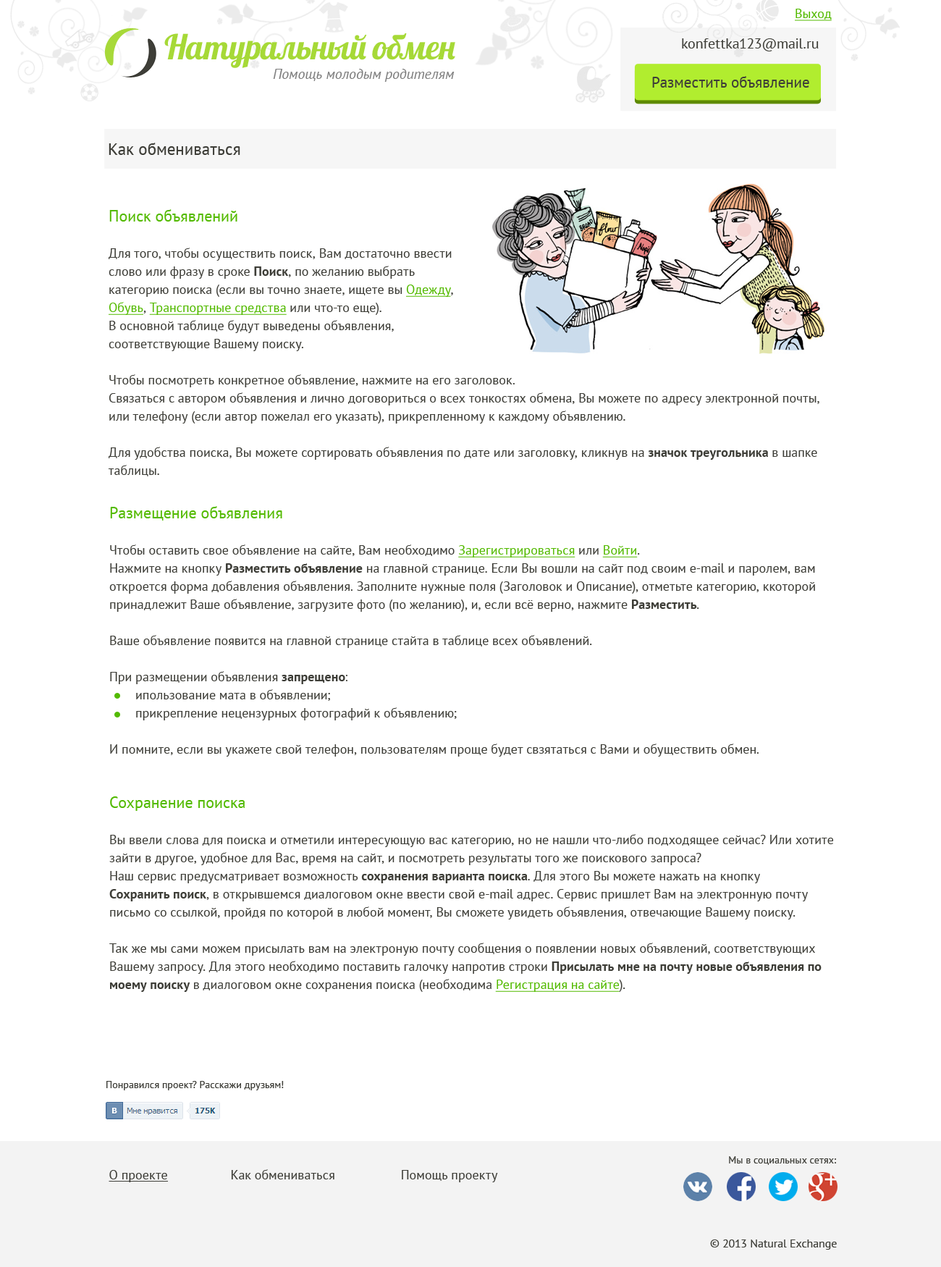
<style>
.page{position:relative;width:941px;height:1267px;background:#ffffff}
.page>*{position:absolute;margin:0}
.t1{font:13px "PTSans-Regular";color:#53ba00;text-decoration:underline}
.t2{font:34.3px "Lobster";letter-spacing:-0.08em;color:#a6d937}
.t3{font:14.5px "PTSans-Regular";color:#3e3e38}
.t4{font:14.5px "PTSans-Italic";color:#7f7f7f}
.t5{font:15.2px "PTSans-Regular";color:#3e3e38}
.t6{font:16.7px "PTSans-Regular";color:#3e3e38}
.t7{font:13px/18.1px "PTSans-Regular";color:#3e3e38}
.t8{font:15.9px/18.1px "PTSans-Regular";color:#53ba00}
.t9{font:13px/18.1px "PTSans-Bold";color:#3e3e38}
.t10{font:13px/18.1px "PTSans-Regular";color:#53ba00;text-decoration:underline}
.t11{font:13px "PTSans-Bold";color:#3e3e38}
.t12{font:10.1px "PTSans-Regular";color:#3e3e38}
.t13{font:13px "PTSans-Regular";color:#3e3e38}
.t14{font:13px "PTSans-Regular";color:#3e3e38;text-decoration:underline}
.t15{font:11.6px "PTSans-Regular";color:#3e3e38}
</style>
<div class="page">
<p class="t1" style="left:795px;top:9px;width:37px;height:12px">Выход</p>
<p class="t2" style="left:164px;top:33px;width:291px;height:35px">Натуральный  обмен</p>
<p class="t3" style="left:682px;top:38px;width:137px;height:13px">konfettka123@mail.ru</p>
<p class="t4" style="left:273px;top:69px;width:182px;height:13px">Помощь молодым родителям</p>
<p class="t5" style="left:652px;top:76px;width:157px;height:12px">Разместить объявление</p>
<p class="t6" style="left:109px;top:143px;width:131px;height:12px">Как обмениваться</p>
<p class="t7" style="left:108px;top:209px;width:712px;height:267px"><span class="t8">Поиск объявлений<br></span> <br>Для того, чтобы осуществить поиск, Вам достаточно ввести слово или фразу в сроке <span class="t9">Поиск</span>, по желанию выбрать категорию поиска (если вы точно знаете, ищете вы <span class="t10">Одежду</span>, <span class="t10">Обувь</span>, <span class="t10">Транспортные средства</span> или что-то еще).<br>В основной таблице будут выведены объявления, соответствующие Вашему поиску. <br><br>Чтобы посмотреть конкретное объявление, нажмите на его заголовок.<br>Связаться с автором объявления и лично договориться о всех тонкостях обмена, Вы можете по адресу электронной почты, или телефону (если автор пожелал его указать), прикрепленному к каждому объявлению.<br><br>Для удобства поиска, Вы можете сортировать объявления по дате или заголовку, кликнув на <span class="t9">значок треугольника</span> в шапке таблицы.</p>
<p class="t7" style="left:109px;top:506px;width:725px;height:486px"><span class="t8">Размещение объявления<br><br></span>Чтобы оставить свое объявление на сайте, Вам необходимо <span class="t10">Зарегистрироваться</span> или <span class="t10">Войти</span>. <br>Нажмите на кнопку <span class="t9">Разместить объявление</span> на главной странице. Если Вы вошли на сайт под своим e-mail и паролем, вам откроется форма добавления объявления. Заполните нужные поля (Заголовок и Описание), отметьте категорию, ккоторой принадлежит Ваше объявление, загрузите фото (по желанию), и, если всё верно, нажмите <span class="t9">Разместить</span>.<br><br>Ваше объявление появится на главной странице стайта в таблице всех объявлений.<br><br>При размещении объявления <span class="t9">запрещено</span>:<br> ипользование мата в объявлении;<br> прикрепление нецензурных фотографий к объявлению;<br><br>И помните, если вы укажете свой телефон, пользователям проще будет свзятаться с Вами и обуществить обмен.<br><span class="t8"><br><br>Сохранение поиска<br><br></span>Вы ввели слова для поиска и отметили интересующую вас категорию, но не нашли что-либо подходящее сейчас? Или хотите зайти в другое, удобное для Вас, время на сайт, и посмотреть результаты того же поискового запроса?<br>Наш сервис предусматривает возможность <span class="t9">сохранения варианта поиска</span>. Для этого Вы можете нажать на кнопку <br><span class="t9">Сохранить поиск</span>, в открывшемся диалоговом окне ввести свой e-mail адрес. Сервис пришлет Вам на электронную почту письмо со ссылкой, пройдя по которой в любой момент, Вы сможете увидеть объявления, отвечающие Вашему поиску.  <br><br>Так же мы сами можем присылать вам на электроную почту сообщения о появлении новых объявлений, соответствующих Вашему запросу. Для этого необходимо поставить галочку напротив строки <span class="t11">Присылать мне на почту новые объявления по моему поиску </span>в диалоговом окне сохранения поиска (необходима <span class="t10">Регистрация на сайте</span>).</p>
<p class="t12" style="left:106px;top:1081px;width:178px;height:9px">Понравился проект? Расскажи друзьям!</p>
<p class="t12" style="left:729px;top:1156px;width:107px;height:9px">Мы в социальных сетях:</p>
<p class="t13" style="left:109px;top:1169px;width:389px;height:13px"><span class="t14">О проекте</span>       Как обмениваться            Помощь  проекту</p>
<p class="t15" style="left:710px;top:1239px;width:127px;height:11px">© 2013 Natural Exchange</p>
</div>
